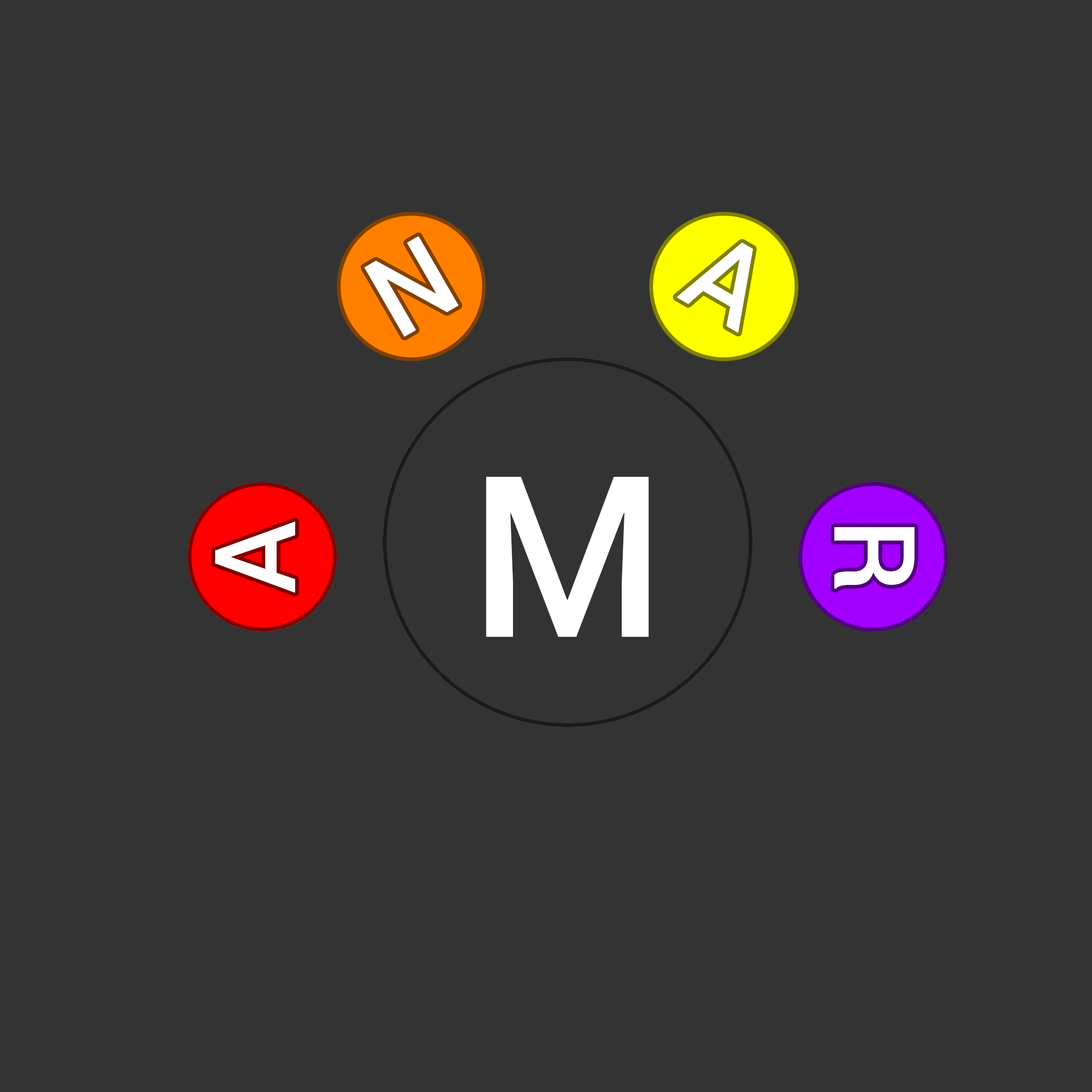
<style>
.page{position:relative;width:1092px;height:1092px;background:#333333}
.page>*{position:absolute;margin:0}
.t1{font:112.6px "Roboto-Medium";color:#ffffff}
.t2{font:225.2px "Roboto-Medium";color:#ffffff}
</style>
<div class="page">
<p class="t1" style="left:364px;top:236px;width:95px;height:101px;rotate:-30deg">N</p>
<p class="t1" style="left:676px;top:242px;width:77px;height:91px;rotate:30deg">A</p>
<p class="t2" style="left:486px;top:477px;width:163px;height:160px">M</p>
<p class="t1" style="left:215px;top:521px;width:80px;height:72px;rotate:-90deg">A</p>
<p class="t1" style="left:834px;top:527px;width:81px;height:62px;rotate:90deg">R</p>
</div>
